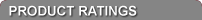
<style>
.page{position:relative;width:202px;height:20px;background:#858585}
.page>*{position:absolute;margin:0}
.t1{font:13.3px "Arial-BoldMT";color:#ffffff}
</style>
<div class="page">
<p class="t1" style="left:9px;top:5px;width:128px;height:11px">PRODUCT RATINGS</p>
</div>
